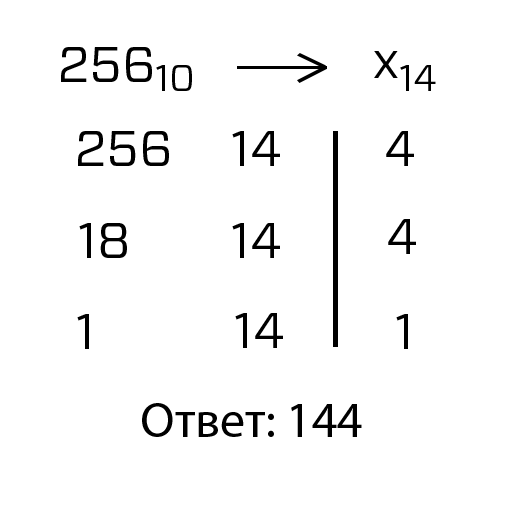
<style>
.page{position:relative;width:512px;height:512px;background:#ffffff}
.page>*{position:absolute;margin:0}
.t1{font:50px "Forza-Book";color:#000000}
.t2{font:37.5px "Forza-Book";color:#000000}
.t3{font:50px "MyriadPro-Regular";color:#000000}
</style>
<div class="page">
<p class="t1" style="left:61px;top:47px;width:91px;height:35px">256</p>
<p class="t1" style="left:374px;top:51px;width:24px;height:27px">x</p>
<p class="t2" style="left:156px;top:65px;width:36px;height:26px">10</p>
<p class="t2" style="left:400px;top:65px;width:36px;height:26px">14</p>
<p class="t1" style="left:78px;top:131px;width:91px;height:35px">256</p>
<p class="t1" style="left:232px;top:131px;width:48px;height:35px">14</p>
<p class="t1" style="left:386px;top:131px;width:28px;height:35px">4</p>
<p class="t1" style="left:388px;top:219px;width:28px;height:35px">4</p>
<p class="t1" style="left:79px;top:223px;width:48px;height:35px">18</p>
<p class="t1" style="left:232px;top:223px;width:48px;height:35px">14</p>
<p class="t1" style="left:77px;top:314px;width:12px;height:35px">1</p>
<p class="t1" style="left:235px;top:313px;width:48px;height:35px">14</p>
<p class="t1" style="left:396px;top:314px;width:12px;height:35px">1</p>
<p class="t3" style="left:142px;top:403px;width:220px;height:34px">Ответ: 144</p>
</div>
